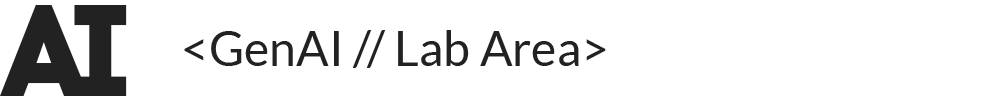
<style>
.page{position:relative;width:1000px;height:100px;background:#ffffff}
.page>*{position:absolute;margin:0}
.t1{font:128px "CodePro-Bold";color:#222222}
.t2{font:48px "Lato-Regular";color:#222222}
</style>
<div class="page">
<p class="t1" style="left:0px;top:5px;width:89px;height:91px">A</p>
<p class="t1" style="left:74px;top:5px;width:53px;height:91px">I</p>
<p class="t2" style="left:184px;top:30px;width:422px;height:38px">&lt;GenAI // Lab Area&gt;</p>
</div>
